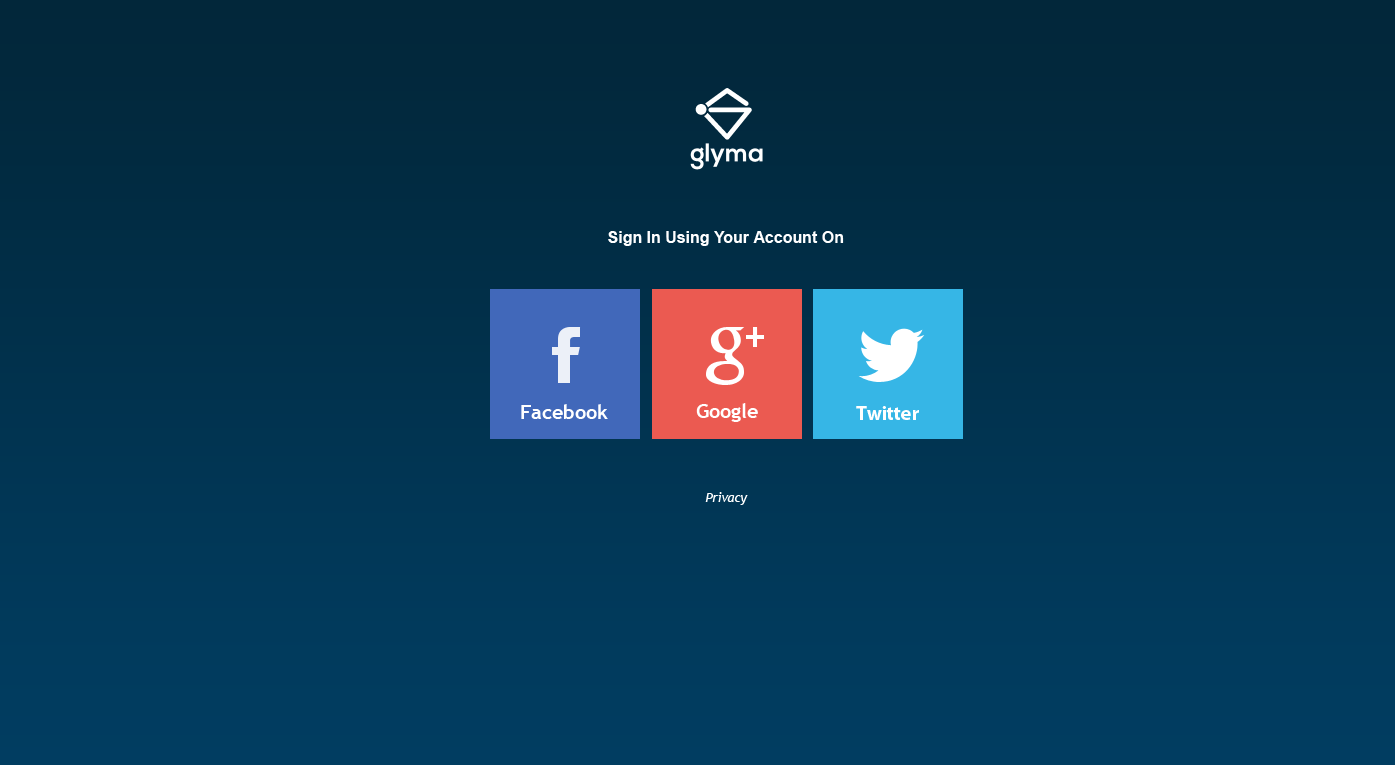
<style>
.page{position:relative;width:1395px;height:765px}
.page>*{position:absolute;margin:0}
.t1{font:16px "Arial-BoldMT";color:#ffffff}
.t2{font:20px "TrebuchetMS-Bold";color:#ffffff}
.t3{font:20px "MyriadPro-Bold";color:#ffffff}
.t4{font:13px "TrebuchetMS-Italic";color:#ffffff}
</style>
<div class="page">
<p class="t1" style="left:608px;top:231px;width:236px;height:15px">Sign In Using Your Account On</p>
<p class="t2" style="left:521px;top:404px;width:87px;height:15px">Facebook</p>
<p class="t2" style="left:696px;top:403px;width:62px;height:19px">Google</p>
<p class="t3" style="left:856px;top:406px;width:63px;height:14px">Twitter</p>
<p class="t4" style="left:705px;top:492px;width:43px;height:13px">Privacy</p>
</div>
